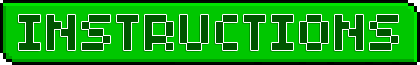
<style>
.page{position:relative;width:420px;height:65px;background:#00c700}
.page>*{position:absolute;margin:0}
.t1{font:56px "04b03";color:#005400}
</style>
<div class="page">
<p class="t1" style="left:19px;top:15px;width:379px;height:35px">INSTRUCTIONS</p>
</div>
